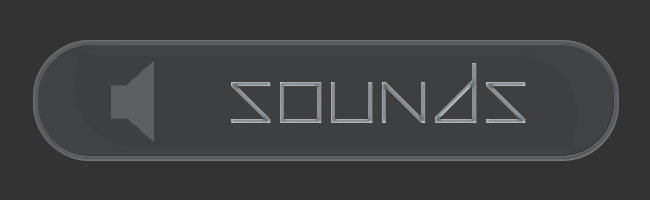
<style>
.page{position:relative;width:650px;height:200px;background:#333333}
.page>*{position:absolute;margin:0}
.t1{font:120px "AuricomRegular";letter-spacing:0.05em}
</style>
<div class="page">
<p class="t1" style="left:231px;top:63px;width:295px;height:60px">sounds</p>
</div>
